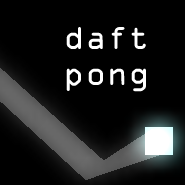
<style>
.page{position:relative;width:185px;height:185px;background:#000000}
.page>*{position:absolute;margin:0}
.t1{font:30px "OCRAStd";color:#ffffff}
</style>
<div class="page">
<p class="t1" style="left:66px;top:27px;width:80px;height:65px;text-align:center">daft<br>pong</p>
</div>
